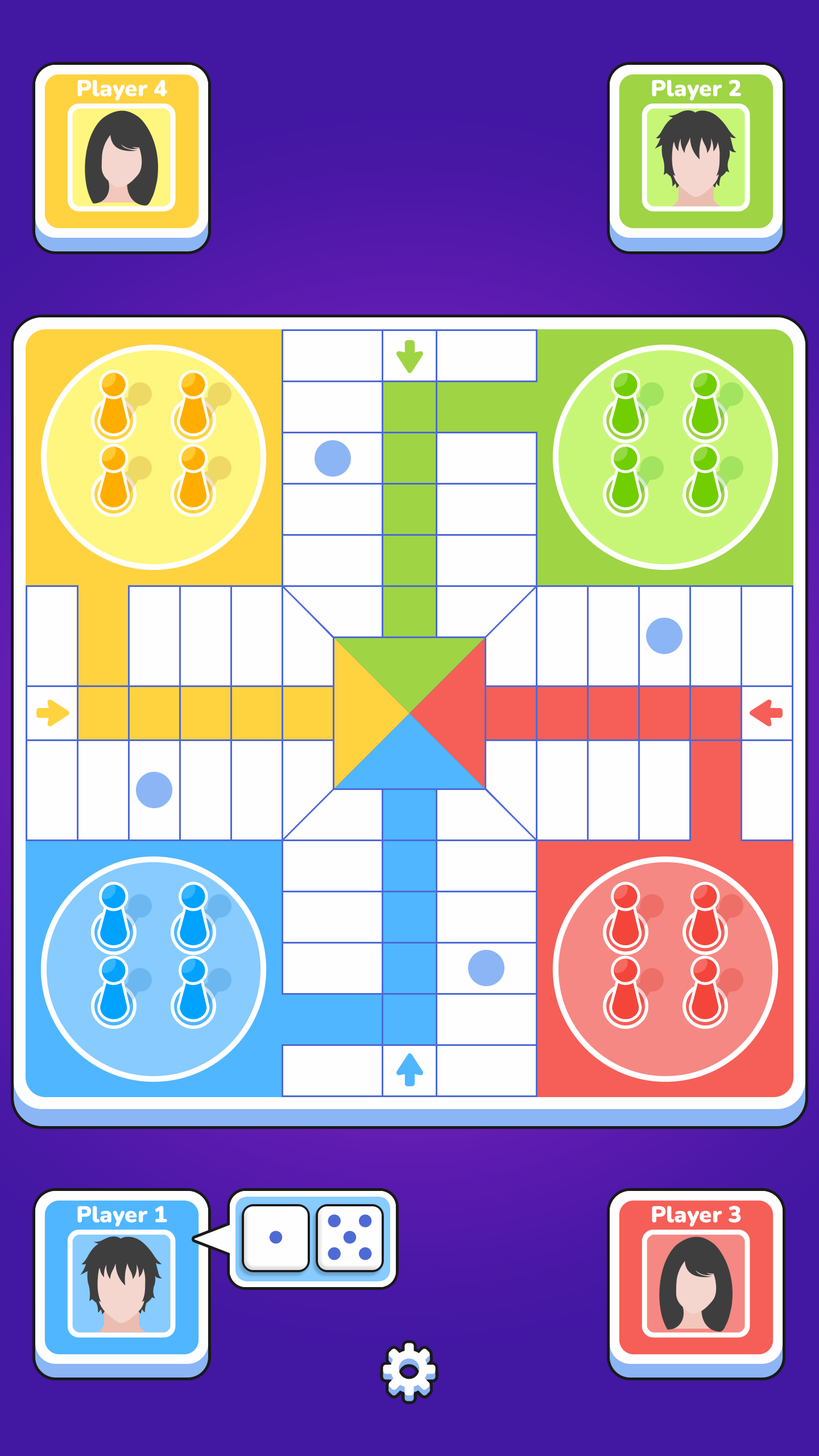
<style>
.page{position:relative;width:819px;height:1456px;background:#fffeff}
.page>*{position:absolute;margin:0}
.t1{font:22.7px "Nunito-Black";color:#ffffff}
</style>
<div class="page">
<p class="t1" style="left:77px;top:80px;width:90px;height:21px">Player 4</p>
<p class="t1" style="left:652px;top:80px;width:89px;height:21px">Player 2</p>
<p class="t1" style="left:77px;top:1206px;width:90px;height:21px">Player 1</p>
<p class="t1" style="left:652px;top:1206px;width:89px;height:21px">Player 3</p>
</div>
